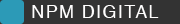
<style>
.page{position:relative;width:180px;height:24px;background:#333333}
.page>*{position:absolute;margin:0}
.t1{font:18px "Helvetica";letter-spacing:0.075em;color:#fffefe;text-transform:uppercase}
</style>
<div class="page">
<p class="t1" style="left:32px;top:5px;width:127px;height:13px">NPM Digital</p>
</div>
